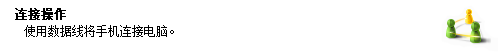
<style>
.page{position:relative;width:498px;height:53px;background:#ffffff}
.page>*{position:absolute;margin:0}
.t1{font:12px "SimSun";color:#000000;font-weight:bold}
.t2{font:12px "SimSun";color:#000000}
</style>
<div class="page">
<p class="t1" style="left:15px;top:8px;width:51px;height:12px">连接操作</p>
<p class="t2" style="left:24px;top:25px;width:150px;height:12px">使用数据线将手机连接电脑。</p>
</div>
